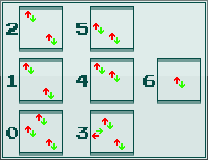
<style>
.page{position:relative;width:208px;height:160px;background:#d9e6e4}
.page>*{position:absolute;margin:0}
.t1{font:14px "PressStart2P-Regular";color:#054c45}
</style>
<div class="page">
<p class="t1" style="left:6px;top:23px;width:12px;height:12px">2</p>
<p class="t1" style="left:76px;top:23px;width:12px;height:12px">5</p>
<p class="t1" style="left:7px;top:75px;width:10px;height:12px">1</p>
<p class="t1" style="left:76px;top:75px;width:12px;height:12px">4</p>
<p class="t1" style="left:143px;top:75px;width:12px;height:12px">6</p>
<p class="t1" style="left:6px;top:127px;width:12px;height:12px">0</p>
<p class="t1" style="left:76px;top:127px;width:12px;height:12px">3</p>
</div>
